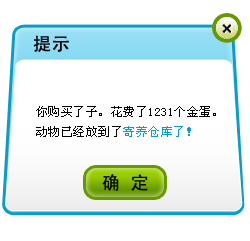
<style>
.page{position:relative;width:250px;height:241px;background:#ffffff}
.page>*{position:absolute;margin:0}
.t1{font:18px "SimHei";letter-spacing:0.04em;color:#000000}
.t2{font:12px/20px "SimSun";letter-spacing:0.04em;color:#000000}
.t3{font:12px/20px "SimSun";letter-spacing:0.04em;color:#089dcb}
</style>
<div class="page">
<p class="t1" style="left:33px;top:35px;width:36px;height:17px">提示</p>
<p class="t2" style="left:36px;top:106px;width:180px;height:31px">你购买了子。花费了1231个金蛋。<br>动物已经放到了<span class="t3">寄养仓库了！</span></p>
<p class="t1" style="left:102px;top:174px;width:46px;height:17px">确 定</p>
</div>
